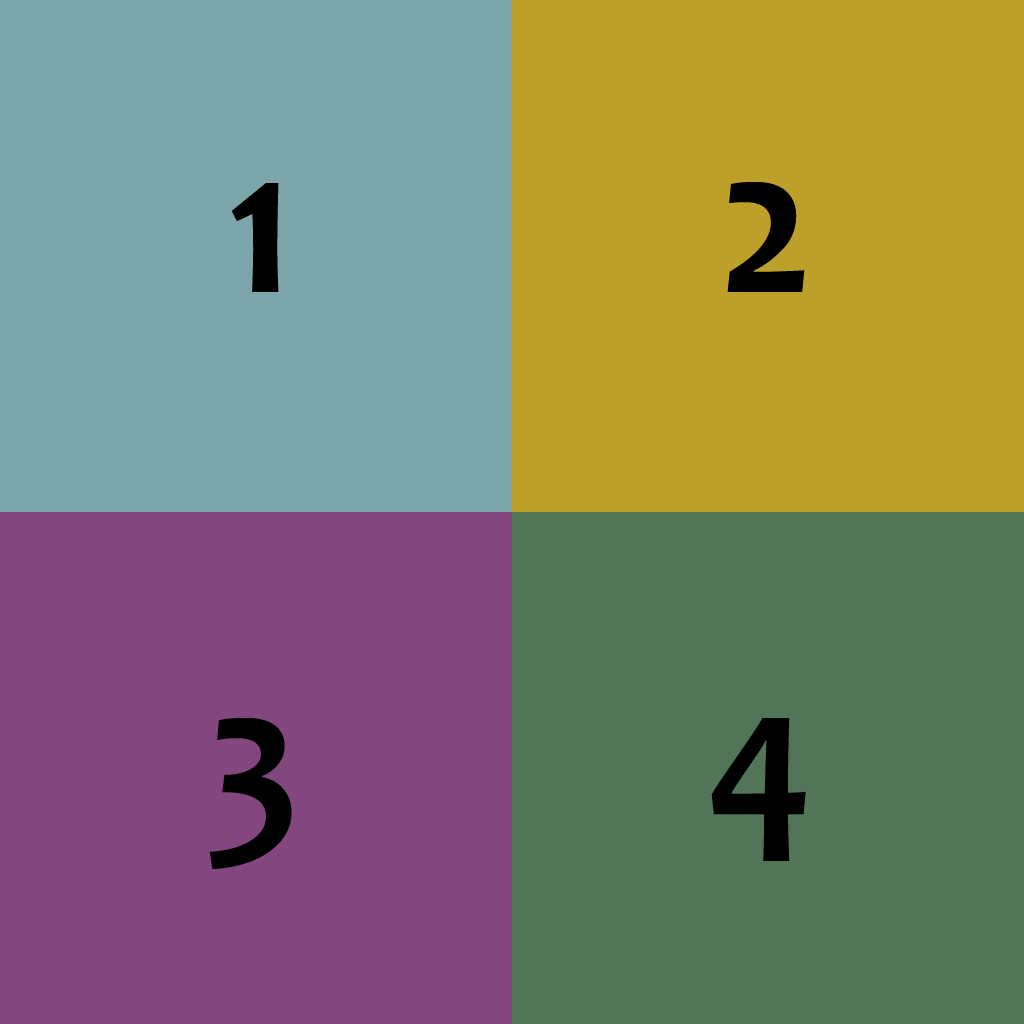
<style>
.page{position:relative;width:1024px;height:1024px;background:#7ca6aa}
.page>*{position:absolute;margin:0}
.t1{font:212px "Candara-Bold";letter-spacing:-0.04em;color:#000000;scale:0.94 1}
.t2{font:212px "Candara-Bold";letter-spacing:-0.04em;color:#010101;scale:0.94 1}
</style>
<div class="page">
<p class="t1" style="left:231px;top:183px;width:48px;height:109px">1</p>
<p class="t1" style="left:727px;top:182px;width:78px;height:110px">2</p>
<p class="t2" style="left:209px;top:718px;width:83px;height:151px">3</p>
<p class="t1" style="left:711px;top:718px;width:95px;height:143px">4</p>
</div>
